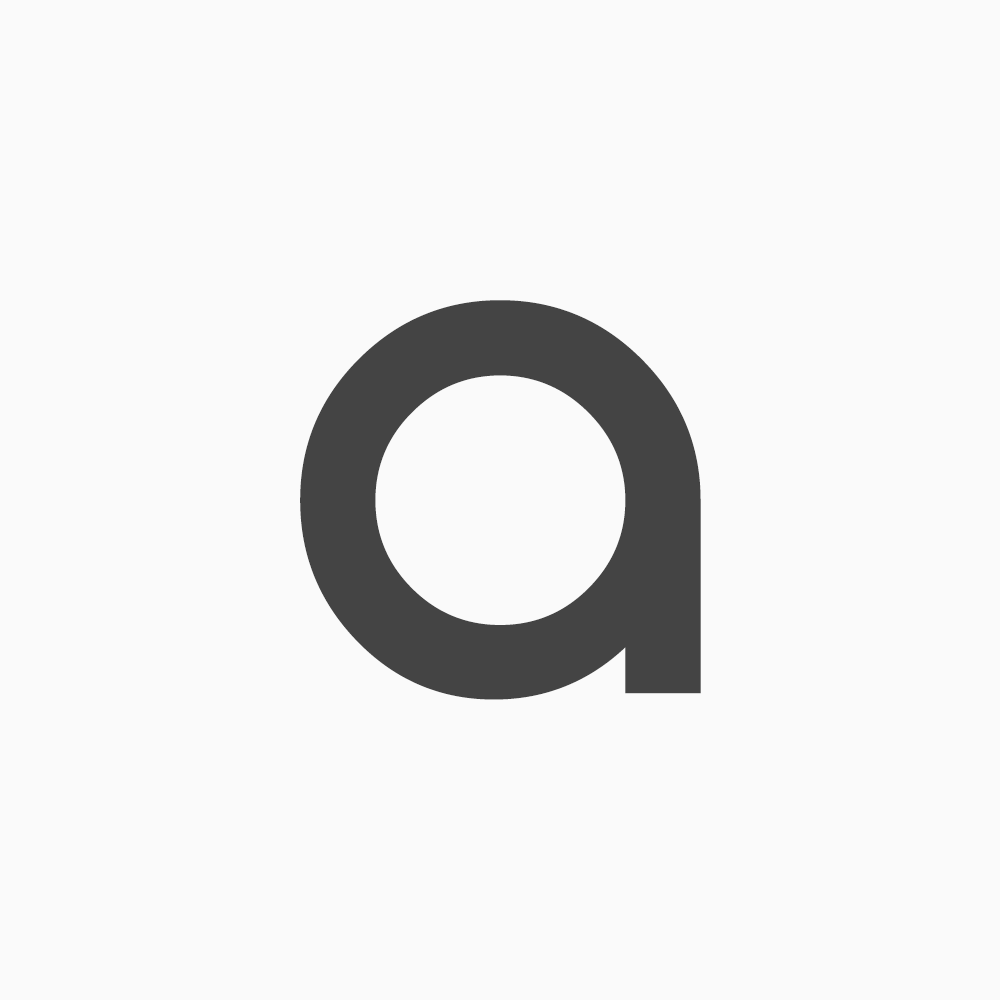
<style>
.page{position:relative;width:1000px;height:1000px;background:#fafafa}
.page>*{position:absolute;margin:0}
.t1{font:750px "SFNewRepublic-Bold";letter-spacing:-0.075em;color:#444444}
</style>
<div class="page">
<p class="t1" style="left:300px;top:300px;width:401px;height:400px">a</p>
</div>
